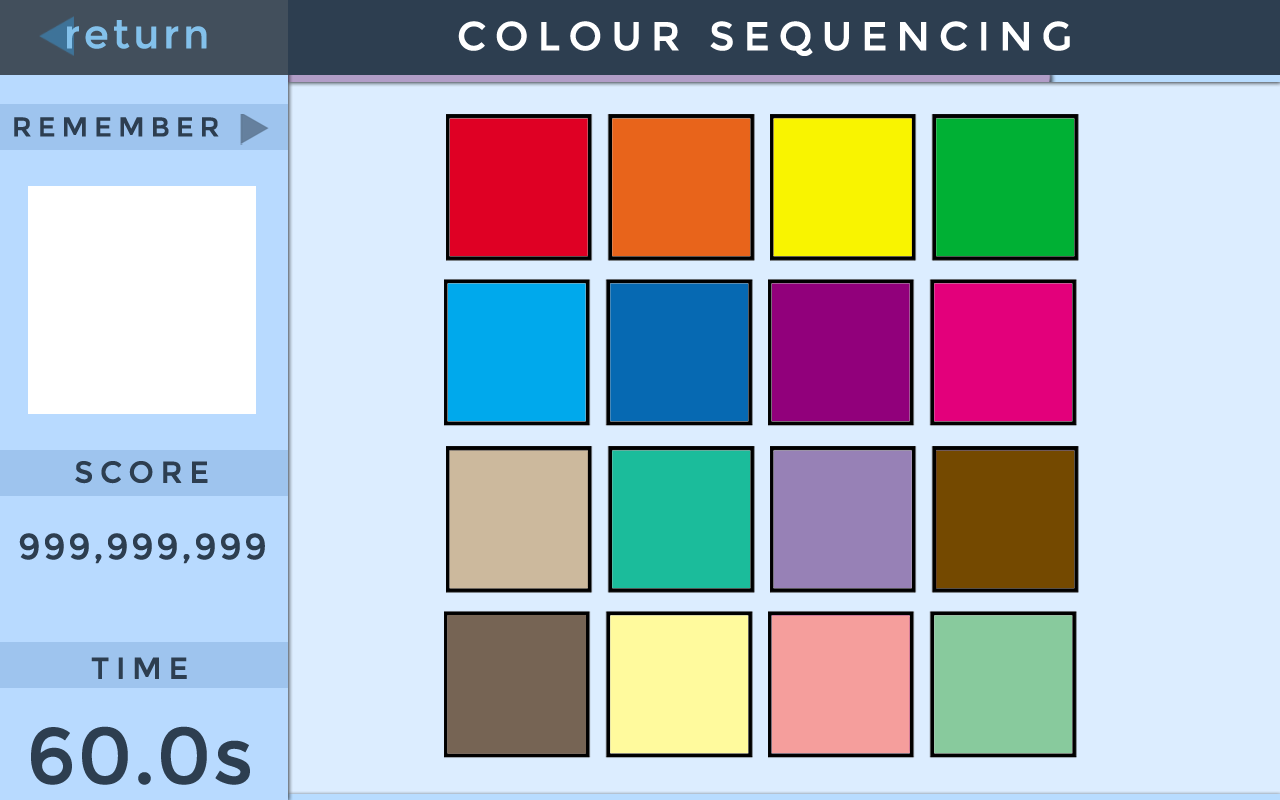
<style>
.page{position:relative;width:1280px;height:800px;background:#dcedff}
.page>*{position:absolute;margin:0}
.t1{font:40px "Montserrat-Regular";letter-spacing:0.075em;color:#83c1eb;font-weight:bold}
.t2{font:40px "Montserrat-Regular";letter-spacing:0.2em;color:#ffffff;text-transform:uppercase;font-weight:bold}
.t3{font:27px "Montserrat-Regular";letter-spacing:0.2em;color:#2d3e50;text-transform:uppercase;font-weight:bold}
.t4{font:30px "Montserrat-Regular";letter-spacing:0.2em;color:#2d3e50;font-weight:bold}
.t5{font:36px "Montserrat-Regular";letter-spacing:0.05em;color:#2d3e50;font-weight:bold}
.t6{font:79px "Montserrat-Regular";color:#2d3e50;text-transform:uppercase;font-weight:bold}
.t7{font:79px "Montserrat-Regular";color:#2d3e50;font-weight:bold}
</style>
<div class="page">
<p class="t1" style="left:67px;top:20px;width:140px;height:29px">return</p>
<p class="t2" style="left:458px;top:21px;width:612px;height:35px">Colour Sequencing</p>
<p class="t3" style="left:14px;top:117px;width:205px;height:20px">Remember</p>
<p class="t4" style="left:75px;top:461px;width:133px;height:23px">SCORE</p>
<p class="t5" style="left:19px;top:533px;width:246px;height:31px">999,999,999</p>
<p class="t4" style="left:91px;top:657px;width:96px;height:22px">TIME</p>
<p class="t6" style="left:31px;top:726px;width:219px;height:59px">60.0<span class="t7">s</span></p>
</div>
